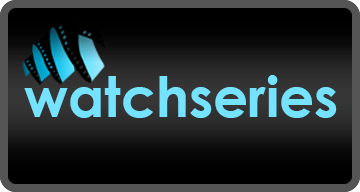
<style>
.page{position:relative;width:360px;height:192px}
.page>*{position:absolute;margin:0}
.t1{font:55px "CenturyGothic-Bold";color:#75e3fe}
</style>
<div class="page">
<p class="t1" style="left:24px;top:75px;width:313px;height:43px">watchseries</p>
</div>
